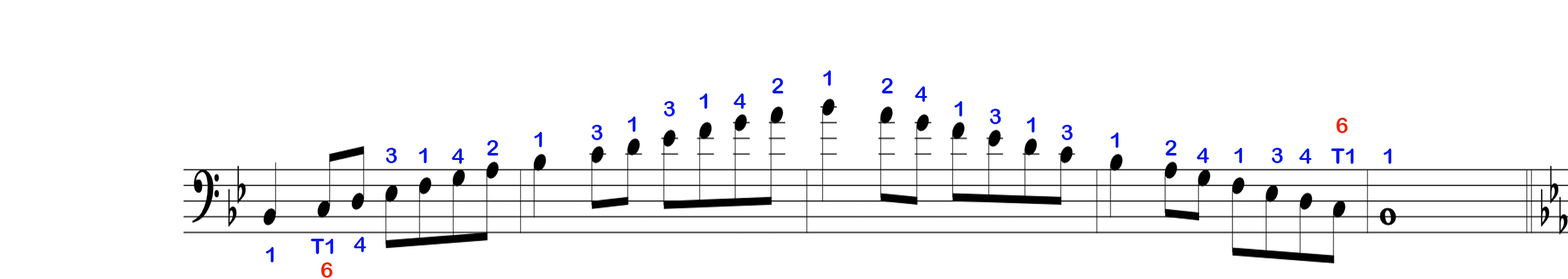
<style>
.page{position:relative;width:1568px;height:279px;background:#ffffff}
.page>*{position:absolute;margin:0}
.t1{font:21.8px "ArialRoundedMTBold";color:#0417ec}
.t2{font:21.8px "ArialRoundedMTBold";color:#ec2404}
</style>
<div class="page">
<p class="t1" style="left:823px;top:70px;width:8px;height:16px">1</p>
<p class="t1" style="left:772px;top:78px;width:11px;height:16px">2</p>
<p class="t1" style="left:881px;top:78px;width:12px;height:16px">2</p>
<p class="t1" style="left:915px;top:86px;width:12px;height:16px">4</p>
<p class="t1" style="left:664px;top:101px;width:11px;height:16px">3</p>
<p class="t1" style="left:699px;top:94px;width:9px;height:15px">1</p>
<p class="t1" style="left:733px;top:94px;width:13px;height:15px">4</p>
<p class="t1" style="left:954px;top:101px;width:9px;height:16px">1</p>
<p class="t1" style="left:990px;top:109px;width:11px;height:15px">3</p>
<p class="t1" style="left:591px;top:125px;width:12px;height:15px">3</p>
<p class="t1" style="left:628px;top:117px;width:8px;height:15px">1</p>
<p class="t1" style="left:1027px;top:117px;width:8px;height:16px">1</p>
<p class="t1" style="left:1061px;top:125px;width:12px;height:15px">3</p>
<p class="t2" style="left:1336px;top:118px;width:12px;height:15px">6</p>
<p class="t1" style="left:534px;top:132px;width:9px;height:15px">1</p>
<p class="t1" style="left:1111px;top:133px;width:8px;height:15px">1</p>
<p class="t1" style="left:386px;top:148px;width:11px;height:15px">3</p>
<p class="t1" style="left:419px;top:148px;width:8px;height:15px">1</p>
<p class="t1" style="left:452px;top:149px;width:12px;height:15px">4</p>
<p class="t1" style="left:487px;top:140px;width:11px;height:16px">2</p>
<p class="t1" style="left:1165px;top:140px;width:12px;height:16px">2</p>
<p class="t1" style="left:1196px;top:148px;width:13px;height:15px">4</p>
<p class="t1" style="left:1234px;top:148px;width:9px;height:15px">1</p>
<p class="t1" style="left:1271px;top:148px;width:12px;height:15px">3</p>
<p class="t1" style="left:1299px;top:149px;width:13px;height:15px">4</p>
<p class="t1" style="left:1331px;top:149px;width:23px;height:15px">T1</p>
<p class="t1" style="left:1384px;top:149px;width:8px;height:15px">1</p>
<p class="t1" style="left:311px;top:239px;width:23px;height:15px">T1</p>
<p class="t1" style="left:354px;top:237px;width:12px;height:15px">4</p>
<p class="t1" style="left:266px;top:247px;width:8px;height:16px">1</p>
<p class="t2" style="left:321px;top:263px;width:11px;height:15px">6</p>
</div>
